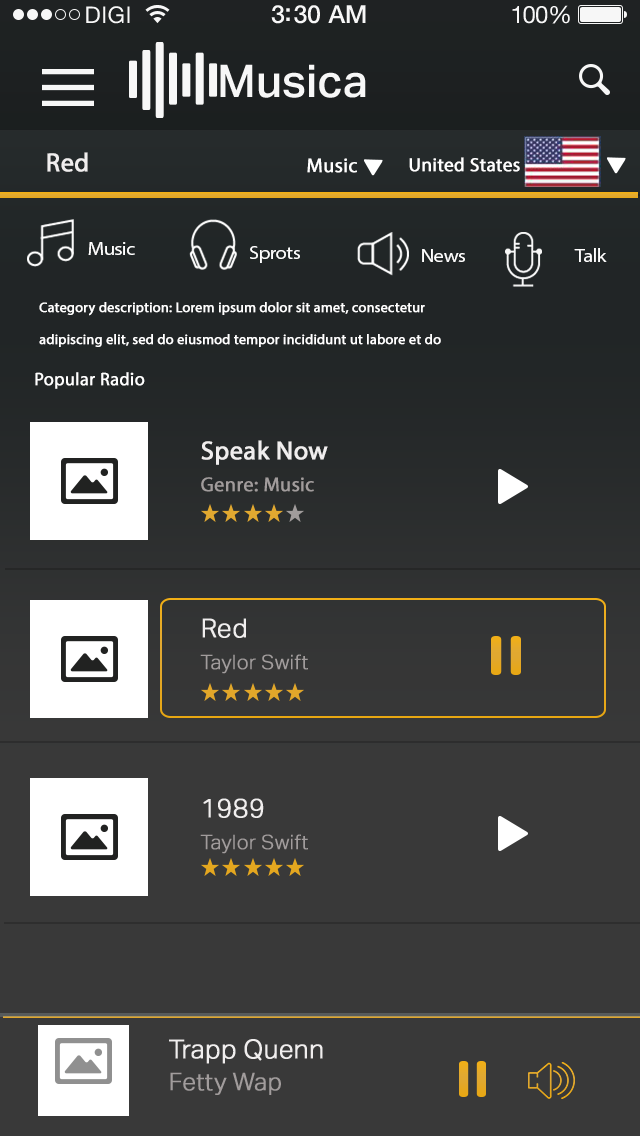
<style>
.page{position:relative;width:640px;height:1136px;background:#393939}
.page>*{position:absolute;margin:0}
.t1{font:45.2px "AktivGroteskTrial-Medium";color:#f7f7f7}
.t2{font:26px "MyriadPro-Regular";color:#f0eeee;font-weight:bold}
.t3{font:20px "MyriadPro-Regular";color:#ffffff;font-weight:bold}
.t4{font:19px "MyriadPro-Regular";color:#ffffff;font-weight:bold}
.t5{font:18.5px "MyriadPro-Regular";letter-spacing:-0.025em;color:#ffffff;scale:1.11 1}
.t6{font:14px/32px "MyriadPro-Regular";color:#ffffff;font-weight:bold}
.t7{font:18px "MyriadPro-Regular";color:#ffffff;font-weight:bold}
.t8{font:20px/32px "MyriadPro-Regular";color:#a19c9c;font-weight:bold}
.t9{font:26px/32px "MyriadPro-Regular";color:#f0eeee;font-weight:bold}
.t10{font:20px/32px "AktivGroteskTrial-Light";color:#a19c9c;font-weight:bold}
.t11{font:26px/32px "AktivGroteskTrial-Light";color:#f0eeee;font-weight:bold}
.t12{font:24px/32px "AktivGroteskTrial-Light";color:#a19c9c;font-weight:bold}
</style>
<div class="page">
<p class="t1" style="left:220px;top:64px;width:146px;height:34px">Musica</p>
<p class="t2" style="left:47px;top:152px;width:41px;height:20px">Red</p>
<p class="t3" style="left:307px;top:158px;width:50px;height:15px">Music</p>
<p class="t4" style="left:409px;top:157px;width:111px;height:15px">United States</p>
<p class="t5" style="left:88px;top:242px;width:47px;height:13px">Music</p>
<p class="t5" style="left:250px;top:246px;width:50px;height:17px">Sprots</p>
<p class="t5" style="left:422px;top:249px;width:43px;height:13px">News</p>
<p class="t5" style="left:574px;top:248px;width:33px;height:14px">Talk</p>
<p class="t6" style="left:39px;top:302px;width:402px;height:45px">Category description: Lorem ipsum dolor sit amet, consectetur <br>adipiscing elit, sed do eiusmod tempor incididunt ut labore et do</p>
<p class="t7" style="left:35px;top:372px;width:110px;height:17px">Popular Radio</p>
<p class="t8" style="left:201px;top:440px;width:127px;height:52px"><span class="t9">Speak Now<br></span>Genre: Music</p>
<p class="t10" style="left:200px;top:618px;width:108px;height:56px"><span class="t11">Red<br></span>Taylor Swift</p>
<p class="t10" style="left:200px;top:798px;width:108px;height:56px"><span class="t11">1989<br></span>Taylor Swift</p>
<p class="t11" style="left:169px;top:1039px;width:154px;height:56px">Trapp Quenn<br><span class="t12">Fetty Wap</span></p>
</div>
